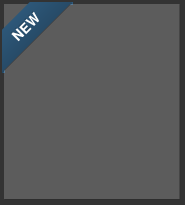
<style>
.page{position:relative;width:185px;height:205px;background:#5c5c5c}
.page>*{position:absolute;margin:0}
.t1{font:14px "Helvetica-Bold";letter-spacing:0.02em;color:#ffffff}
</style>
<div class="page">
<p class="t1" style="left:11px;top:11px;width:28px;height:31px;rotate:-45deg">NEW</p>
</div>
